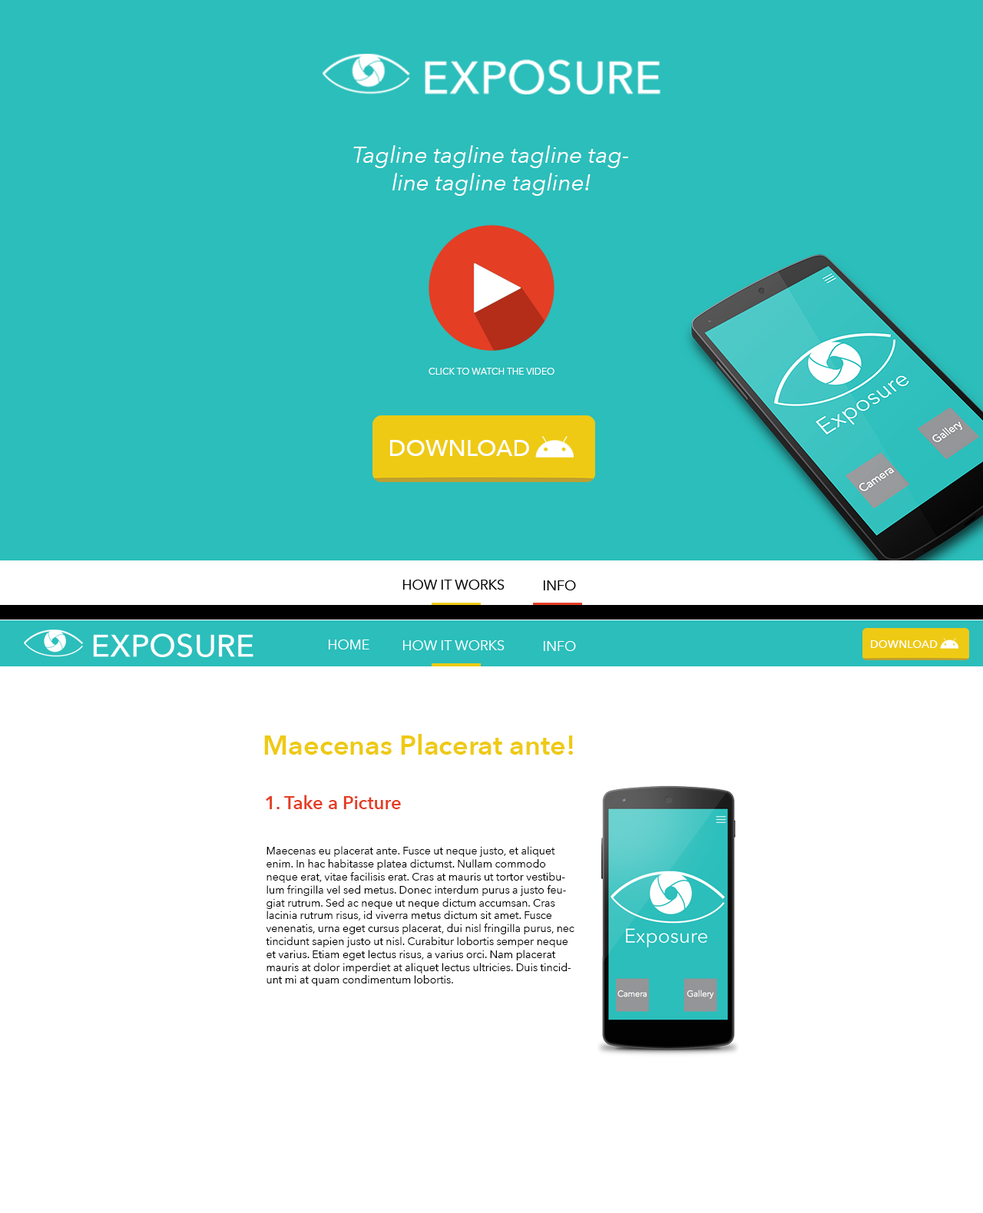
<style>
.page{position:relative;width:983px;height:1213px;background:#ffffff}
.page>*{position:absolute;margin:0}
.t1{font:23px "AvenirNext-Italic";color:#ffffff}
.t2{font:9.2px "AvenirNext-Regular";color:#ffffff}
.t3{font:23px "AvenirNext-Medium";color:#ffffff}
.t4{font:11.1px "AvenirNext-Medium";color:#ffffff}
.t5{font:27.6px "AvenirNext-DemiBold";color:#eeca14}
.t6{font:18.4px "AvenirNext-DemiBold";color:#e43e25}
.t7{font:10.8px "AvenirNext-Regular";color:#000000}
</style>
<div class="page">
<p class="t1" style="left:353px;top:145px;width:275px;height:51px;text-align:center">Tagline tagline tagline tagline tagline tagline!</p>
<p class="t2" style="left:428px;top:368px;width:126px;height:7px">CLICK TO WATCH THE VIDEO</p>
<p class="t3" style="left:390px;top:440px;width:139px;height:16px">DOWNLOAD</p>
<p class="t4" style="left:871px;top:640px;width:67px;height:8px">DOWNLOAD</p>
<p class="t5" style="left:264px;top:734px;width:309px;height:21px">Maecenas Placerat ante!</p>
<p class="t6" style="left:266px;top:795px;width:135px;height:14px">1. Take a Picture</p>
<p class="t7" style="left:266px;top:846px;width:308px;height:140px">Maecenas eu placerat ante. Fusce ut neque justo, et aliquet enim. In hac habitasse platea dictumst. Nullam commodo neque erat, vitae facilisis erat. Cras at mauris ut tortor vestibulum fringilla vel sed metus. Donec interdum purus a justo feugiat rutrum. Sed ac neque ut neque dictum accumsan. Cras lacinia rutrum risus, id viverra metus dictum sit amet. Fusce venenatis, urna eget cursus placerat, dui nisl fringilla purus, nec tincidunt sapien justo ut nisl. Curabitur lobortis semper neque et varius. Etiam eget lectus risus, a varius orci. Nam placerat mauris at dolor imperdiet at aliquet lectus ultricies. Duis tincidunt mi at quam condimentum lobortis.</p>
</div>
